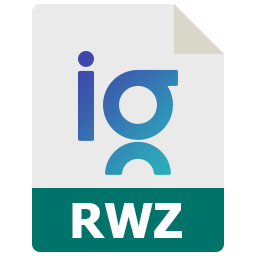
<style>
.page{position:relative;width:256px;height:256px;background:#eaeaea}
.page>*{position:absolute;margin:0}
.t1{font:48px "Tahoma-Bold";color:#ffffff}
</style>
<div class="page">
<p class="t1" style="left:72px;top:203px;width:110px;height:35px">RWZ</p>
</div>
